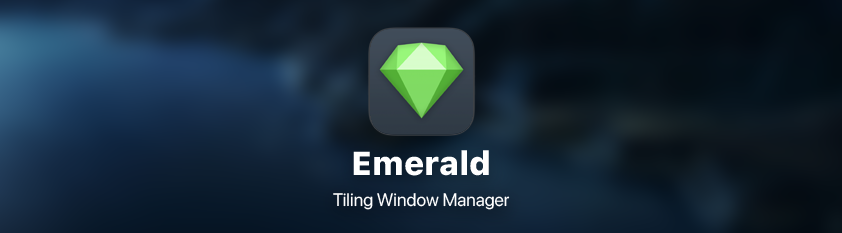
<style>
.page{position:relative;width:842px;height:233px}
.page>*{position:absolute;margin:0}
.t1{font:33px "SFProText-Heavy";color:#ffffff}
.t2{font:18px "SFPro-Regular";color:#ffffff}
</style>
<div class="page">
<p class="t1" style="left:353px;top:150px;width:136px;height:26px">Emerald</p>
<p class="t2" style="left:333px;top:193px;width:177px;height:17px">Tiling Window Manager</p>
</div>
